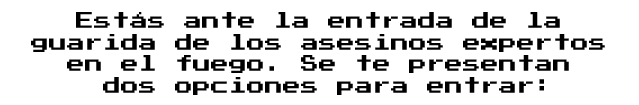
<style>
.page{position:relative;width:639px;height:105px;background:#ffffff}
.page>*{position:absolute;margin:0}
.t1{font:18px "PressStart2P";color:#000000}
</style>
<div class="page">
<p class="t1" style="left:31px;top:12px;width:574px;height:83px;text-align:center">Estás ante la entrada de la <br>guarida de los asesinos expertos <br>en el fuego. Se te presentan <br>dos opciones para entrar:</p>
</div>
